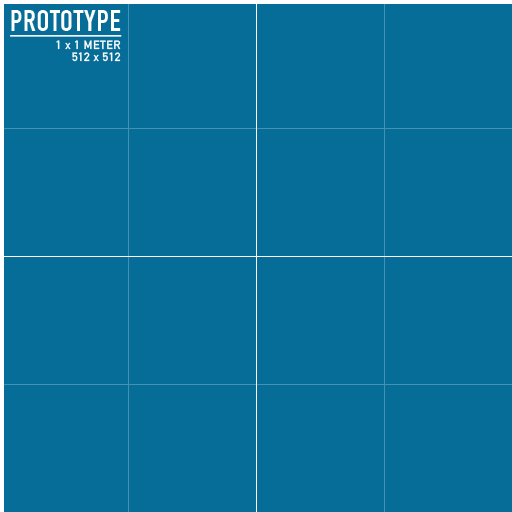
<style>
.page{position:relative;width:512px;height:512px;background:#066d98}
.page>*{position:absolute;margin:0}
.t1{font:12px/18px "DINAlternate-Bold";letter-spacing:0.025em;color:#ffffff}
.t2{font:30px/18px "DINCondensed-Bold";letter-spacing:0.025em;color:#ffffff;text-decoration:underline}
.t3{font:12px/12px "DINAlternate-Bold";letter-spacing:0.025em;color:#ffffff}
</style>
<div class="page">
<p class="t1" style="left:10px;top:10px;width:112px;height:52px;text-align:right"><span class="t2">PROTOTYPE<br></span>1 x 1 METER<br><span class="t3">512 x 512</span></p>
</div>
